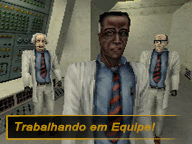
<style>
.page{position:relative;width:192px;height:144px}
.page>*{position:absolute;margin:0}
.t1{font:10.2px "Arial-ItalicMT";letter-spacing:0.01em;color:#bd8c08;font-weight:bold;scale:1.18 1}
.t2{font:11.4px "Arial-ItalicMT";letter-spacing:0.01em;color:#bd8c08;font-weight:bold;scale:1.05 1}
</style>
<div class="page">
<p class="t1" style="left:15px;top:122px;width:141px;height:11px"><span class="t2">T</span>rabalhando em Equipe!</p>
</div>
